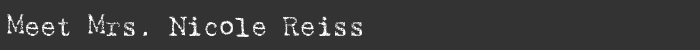
<style>
.page{position:relative;width:700px;height:50px;background:#333333}
.page>*{position:absolute;margin:0}
.t1{font:28px "Harting-Plain";letter-spacing:-0.025em;color:#ffffff}
</style>
<div class="page">
<p class="t1" style="left:7px;top:14px;width:355px;height:23px">Meet Mrs. Nicole Reiss</p>
</div>
